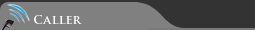
<style>
.page{position:relative;width:255px;height:30px;background:#808080}
.page>*{position:absolute;margin:0}
.t1{font:12px "TrajanPro-Bold";color:#ffffff;scale:1.05 1}
</style>
<div class="page">
<p class="t1" style="left:34px;top:15px;width:48px;height:9px">Caller</p>
</div>
